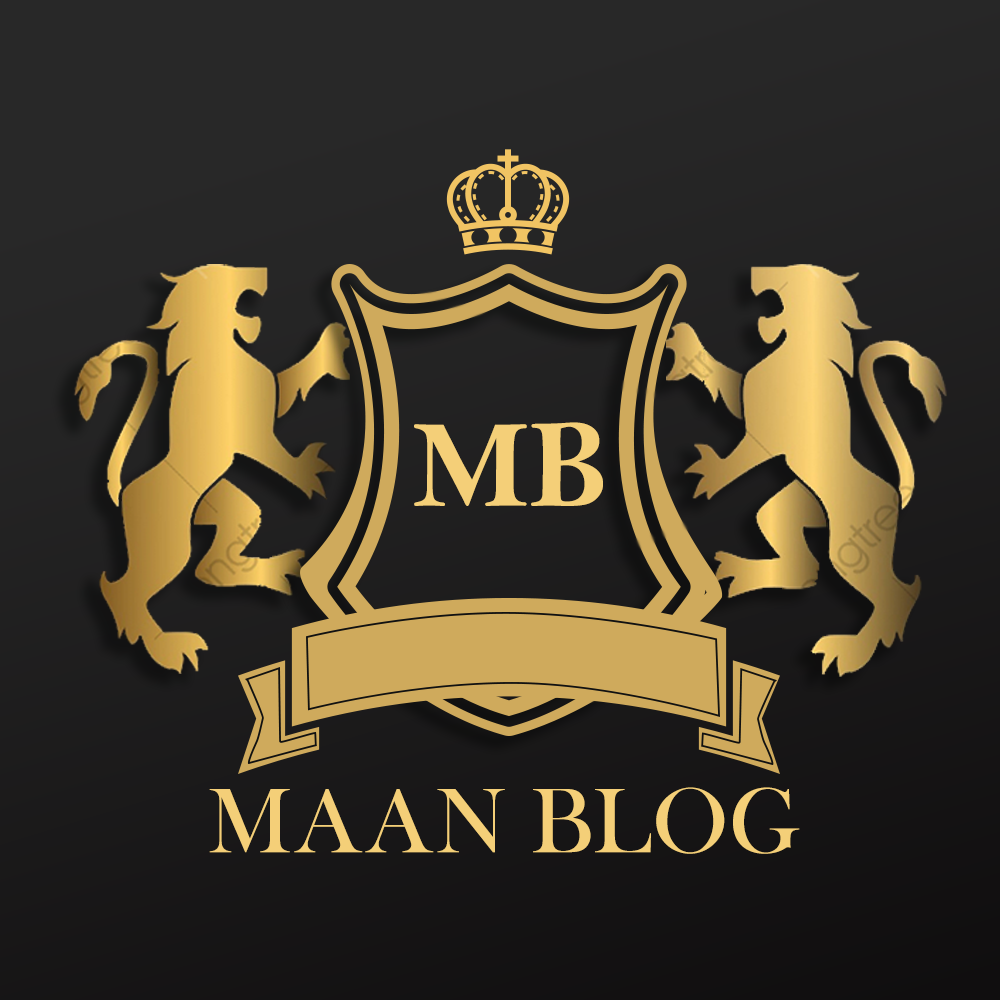
<style>
.page{position:relative;width:1000px;height:1000px}
.page>*{position:absolute;margin:0}
.t1{font:125.4px "BellMTBold";color:#f4cf78}
.t2{font:94.9px "BaskOldFace";color:#f4cf78}
</style>
<div class="page">
<p class="t1" style="left:414px;top:422px;width:189px;height:84px">MB</p>
<p class="t2" style="left:209px;top:787px;width:591px;height:67px">MAAN BLOG</p>
</div>
